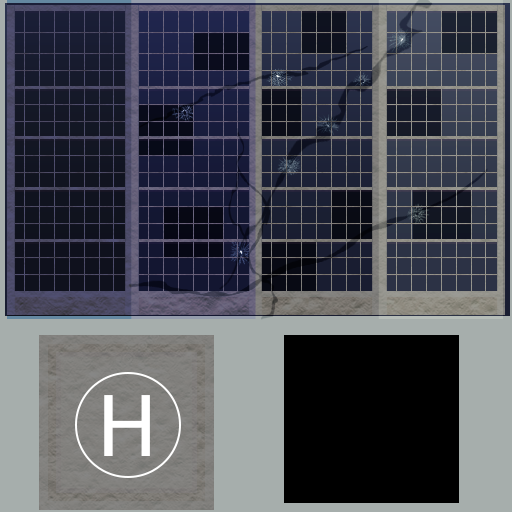
<style>
.page{position:relative;width:512px;height:512px}
.page>*{position:absolute;margin:0}
.t1{font:90.9px "MS-UIGothic";letter-spacing:-0.025em;color:#ffffff}
</style>
<div class="page">
<p class="t1" style="left:104px;top:395px;width:46px;height:61px">H</p>
</div>
